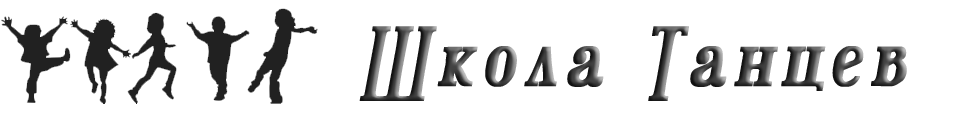
<style>
.page{position:relative;width:960px;height:121px;background:#ffffff}
.page>*{position:absolute;margin:0}
.t1{font:87.9px "DarkEuphorigenic";letter-spacing:0.1em;font-weight:bold;font-style:italic}
</style>
<div class="page">
<p class="t1" style="left:359px;top:26px;width:548px;height:75px">Школа Танцев</p>
</div>
